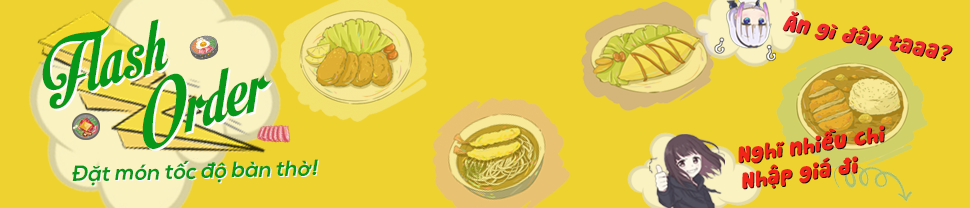
<style>
.page{position:relative;width:970px;height:208px;background:#eed230}
.page>*{position:absolute;margin:0}
.t1{font:22px "SVN-Cookies";color:#f12b30;font-style:italic}
.t2{font:22px "SVN-Cookies";font-style:italic}
.t3{font:81.5px "SVN-MotionPicture";color:#089719;font-style:italic}
.t4{font:81.5px "SVN-MotionPicture";font-style:italic}
.t5{font:81.5px "SVN-MotionPicture";color:#089819;font-style:italic}
.t6{font:22px "SVN-Cookies";color:#f3241a;font-style:italic}
.t7{font:22px "SVN-NexaBold";color:#089719;font-style:italic}
.t8{font:22px "SVN-NexaBold";font-style:italic}
</style>
<div class="page">
<p class="t1" style="left:782px;top:11px;width:170px;height:49px;rotate:11deg">Ăn gì đây taaa?</p>
<p class="t2" style="left:783px;top:12px;width:170px;height:49px;rotate:11deg">Ăn gì đây taaa?</p>
<p class="t3" style="left:42px;top:19px;width:127px;height:90px;rotate:-17deg">Flash</p>
<p class="t4" style="left:44px;top:21px;width:127px;height:90px;rotate:-17deg">Flash</p>
<p class="t5" style="left:142px;top:67px;width:129px;height:82px;rotate:-17deg">Order</p>
<p class="t4" style="left:144px;top:69px;width:129px;height:82px;rotate:-17deg">Order</p>
<p class="t6" style="left:738px;top:125px;width:147px;height:64px;rotate:-8deg">Nghĩ nhiều chi<br>Nhập giá đi</p>
<p class="t2" style="left:739px;top:126px;width:147px;height:64px;rotate:-8deg">Nghĩ nhiều chi<br>Nhập giá đi</p>
<p class="t7" style="left:72px;top:159px;width:246px;height:27px;rotate:-1deg">Đặt món tốc độ bàn thờ!</p>
<p class="t8" style="left:73px;top:160px;width:246px;height:27px;rotate:-1deg">Đặt món tốc độ bàn thờ!</p>
</div>
